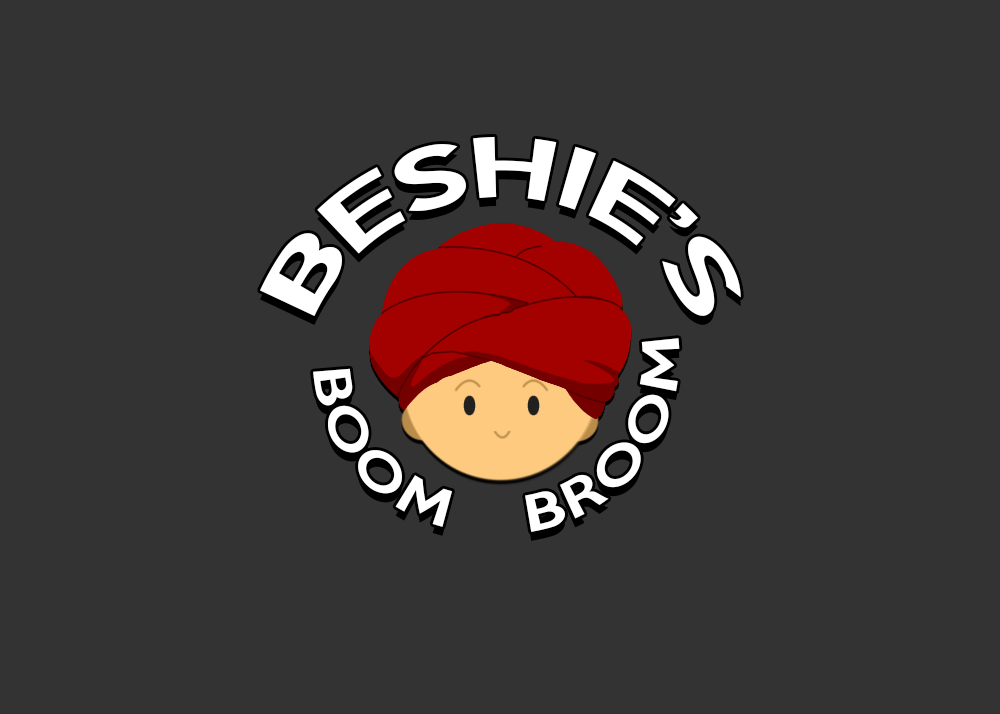
<style>
.page{position:relative;width:1000px;height:714px;background:#333333}
.page>*{position:absolute;margin:0}
.t1{font:75px/229.2px "KeepCalm-Medium";color:#ffffff}
.t2{font:45.8px "KeepCalm-Medium";color:#ffffff}
</style>
<div class="page">
<p class="t1" style="left:260px;top:136px;width:481px;height:180px;text-align:center">BESHIE’S</p>
<p class="t2" style="left:525px;top:338px;width:155px;height:194px;rotate:-53deg">BROOM</p>
<p class="t2" style="left:313px;top:368px;width:139px;height:159px;rotate:50deg">BOOM</p>
</div>
